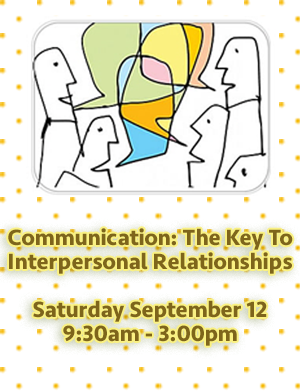
<style>
.page{position:relative;width:300px;height:392px;background:#ffffff}
.page>*{position:absolute;margin:0}
.t1{font:23px/24px "Seravek-Bold";color:#7e651b}
</style>
<div class="page">
<p class="t1" style="left:8px;top:228px;width:285px;height:118px;text-align:center">Communication: The Key To Interpersonal Relationships<br><br>Saturday September 12<br>9:30am - 3:00pm</p>
</div>
